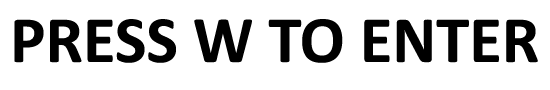
<style>
.page{position:relative;width:550px;height:90px;background:#ffffff}
.page>*{position:absolute;margin:0}
.t1{font:66.7px "Calibri-Bold";color:#000000}
</style>
<div class="page">
<p class="t1" style="left:14px;top:19px;width:524px;height:44px">PRESS W TO ENTER</p>
</div>
